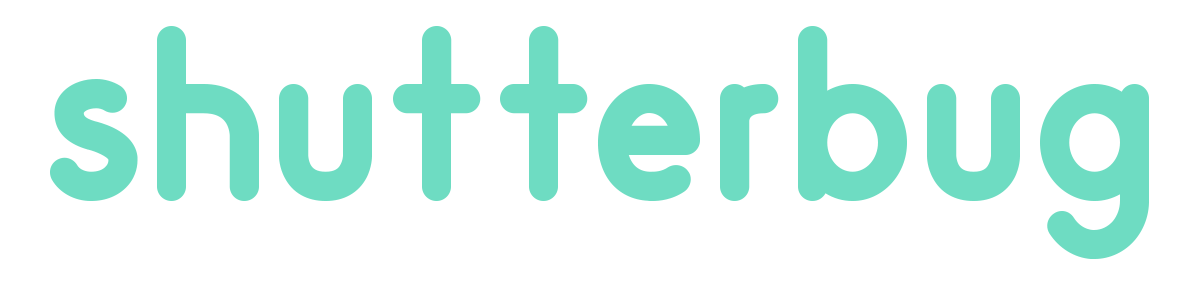
<style>
.page{position:relative;width:1179px;height:296px;background:#ffffff}
.page>*{position:absolute;margin:0}
.t1{font:250px "Odin-Bold";color:#6edcc2}
</style>
<div class="page">
<p class="t1" style="left:49px;top:26px;width:1100px;height:233px">shutterbug</p>
</div>
